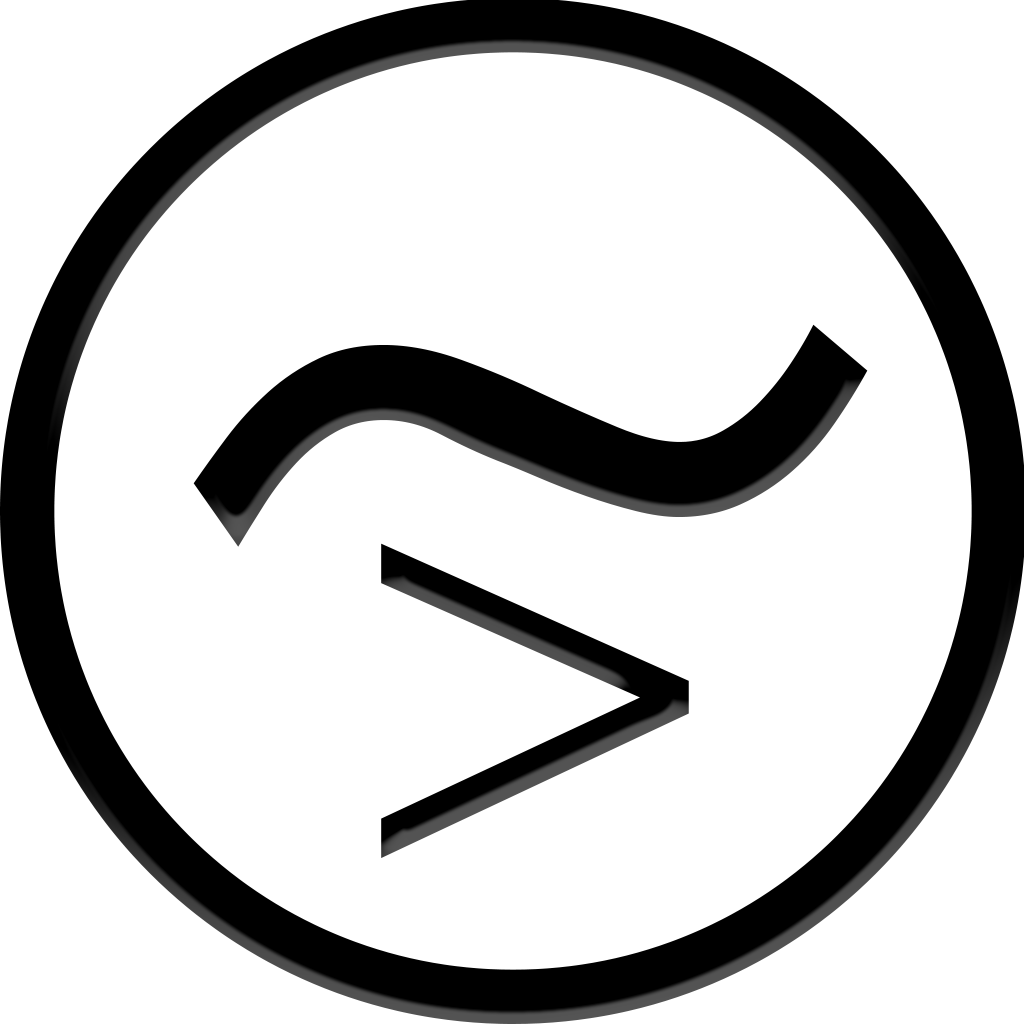
<style>
.page{position:relative;width:1024px;height:1024px;background:#ffffff}
.page>*{position:absolute;margin:0}
.t1{font:1347.3px "Helvetica-Light";color:#000000}
.t2{font:615.3px "Helvetica-Light";color:#000000}
</style>
<div class="page">
<p class="t1" style="left:193px;top:324px;width:675px;height:223px">~</p>
<p class="t2" style="left:381px;top:543px;width:308px;height:315px">&gt;</p>
</div>
